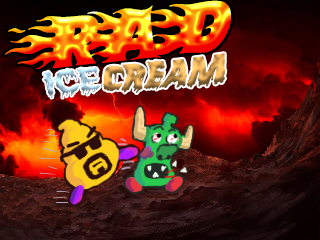
<style>
.page{position:relative;width:320px;height:240px}
.page>*{position:absolute;margin:0}
.t1{font:69.9px "Blazed";letter-spacing:-0.38em;scale:0.84 1}
.t2{font:34.9px "ScaryHalloweenFont-Bold";scale:1.08 1}
.t3{font:34.9px "Bloodsoul";scale:1.08 1}
</style>
<div class="page">
<p class="t1" style="left:5px;top:0px;width:226px;height:69px;rotate:-6deg">RAD</p>
<p class="t2" style="left:43px;top:53px;width:183px;height:45px;rotate:-6deg"><span class="t3">ICE</span>cream</p>
</div>
